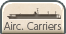
<style>
.page{position:relative;width:66px;height:34px}
.page>*{position:absolute;margin:0}
.t1{font:10px "UDShinGoPro-Light";color:#6a6560;scale:0.9 1}
</style>
<div class="page">
<p class="t1" style="left:4px;top:22px;width:58px;height:8px">Airc. Carriers</p>
</div>
